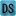
<style>
.page{position:relative;width:16px;height:16px}
.page>*{position:absolute;margin:0}
.t1{font:12px "MS-Gothic";color:#000000}
</style>
<div class="page">
<p class="t1" style="left:2px;top:3px;width:12px;height:11px">DS</p>
</div>
